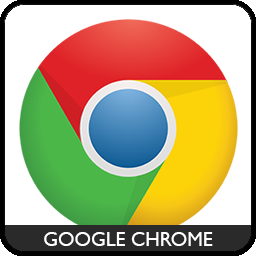
<style>
.page{position:relative;width:256px;height:256px;background:#ffffff}
.page>*{position:absolute;margin:0}
.t1{font:20px "GillSansMT";color:#ffffff}
</style>
<div class="page">
<p class="t1" style="left:44px;top:232px;width:169px;height:14px">GOOGLE CHROME</p>
</div>
